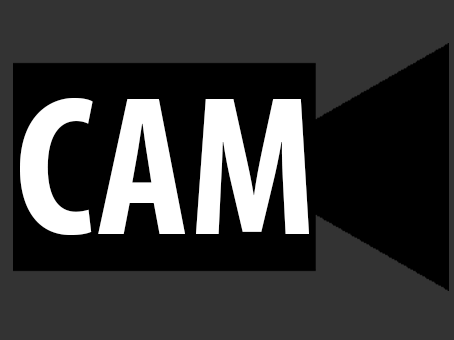
<style>
.page{position:relative;width:454px;height:340px;background:#333333}
.page>*{position:absolute;margin:0}
.t1{font:200px "MyriadPro-BoldCond";color:#ffffff}
</style>
<div class="page">
<p class="t1" style="left:20px;top:98px;width:289px;height:137px">CAM</p>
</div>
